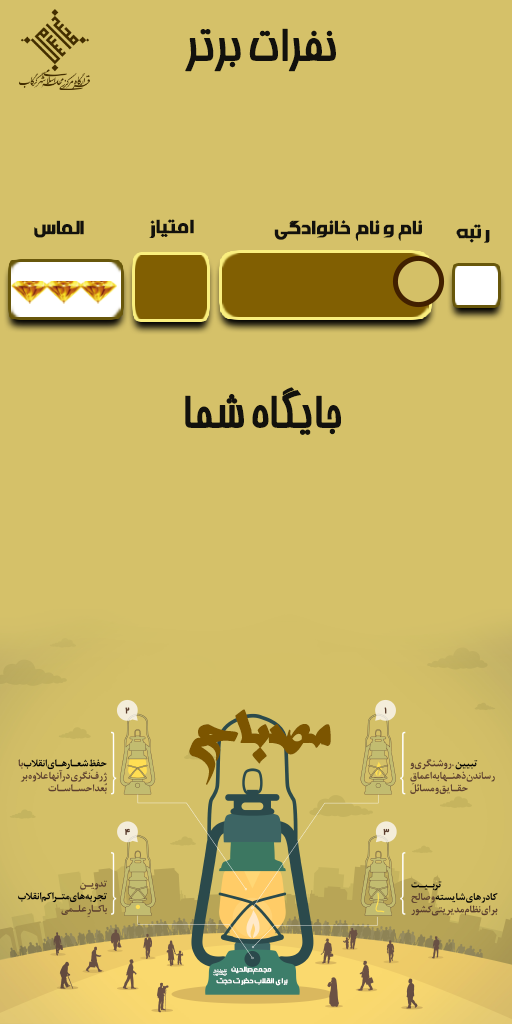
<style>
.page{position:relative;width:512px;height:1024px;background:#d5c169}
.page>*{position:absolute;margin:0}
.t1{font:43.1px "BBardiyaBold";letter-spacing:-0.01em;color:#12110d;font-weight:bold}
.t2{font:23.5px "AAmine-Bold";letter-spacing:-0.01em;color:#12110d;font-weight:bold}
.t3{font:66.7px "ARozeB";letter-spacing:-0.01em;color:#7c5500;font-weight:bold}
.t4{font:8.5px/11.5px "AAmine-Bold";letter-spacing:-0.025em;color:#ffffff;font-weight:bold}
.t5{font:10.1px "Dorood";letter-spacing:-0.025em;color:#ffffff;font-weight:bold}
</style>
<div class="page">
<p class="t1" style="left:185px;top:28px;width:151px;height:44px">نفرات برتر</p>
<p class="t2" style="left:34px;top:220px;width:50px;height:18px">الماس</p>
<p class="t2" style="left:149px;top:219px;width:45px;height:19px">امتیاز</p>
<p class="t2" style="left:274px;top:220px;width:148px;height:21px">نام و نام خانوادگی</p>
<p class="t2" style="left:456px;top:224px;width:34px;height:19px">رتبه</p>
<p class="t1" style="left:185px;top:387px;width:156px;height:48px">جایگاه شما</p>
<p class="t3" style="left:189px;top:709px;width:142px;height:76px">مصباح</p>
<p class="t4" style="left:216px;top:966px;width:72px;height:20px;text-align:center">مجمع صالحین <br>برای انقلاب حضرت حجت</p>
<p class="t5" style="left:213px;top:969px;width:14px;height:7px">Q</p>
</div>
